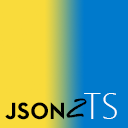
<style>
.page{position:relative;width:128px;height:128px;background:#007acc}
.page>*{position:absolute;margin:0}
.t1{font:24px "NeutraText-Bold";color:#000000}
.t2{font:36px "RageItalic";color:#000000;scale:1.12 1}
.t3{font:36px "SegoeUI-Light";color:#fefefe}
</style>
<div class="page">
<p class="t1" style="left:5px;top:102px;width:59px;height:18px">JSON</p>
<p class="t2" style="left:66px;top:98px;width:21px;height:20px;rotate:-2deg">2</p>
<p class="t3" style="left:84px;top:93px;width:33px;height:26px">TS</p>
</div>
